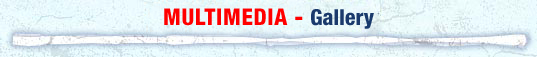
<style>
.page{position:relative;width:537px;height:57px}
.page>*{position:absolute;margin:0}
.t1{font:23px "HelveticaNeueLT-HeavyCond";letter-spacing:0.025em;color:#ff0000}
.t2{font:22px "HelveticaNeueLT-HeavyCond";color:#1a3a6c}
</style>
<div class="page">
<p class="t1" style="left:164px;top:8px;width:210px;height:21px">MULTIMEDIA - <span class="t2">Gallery</span></p>
</div>
